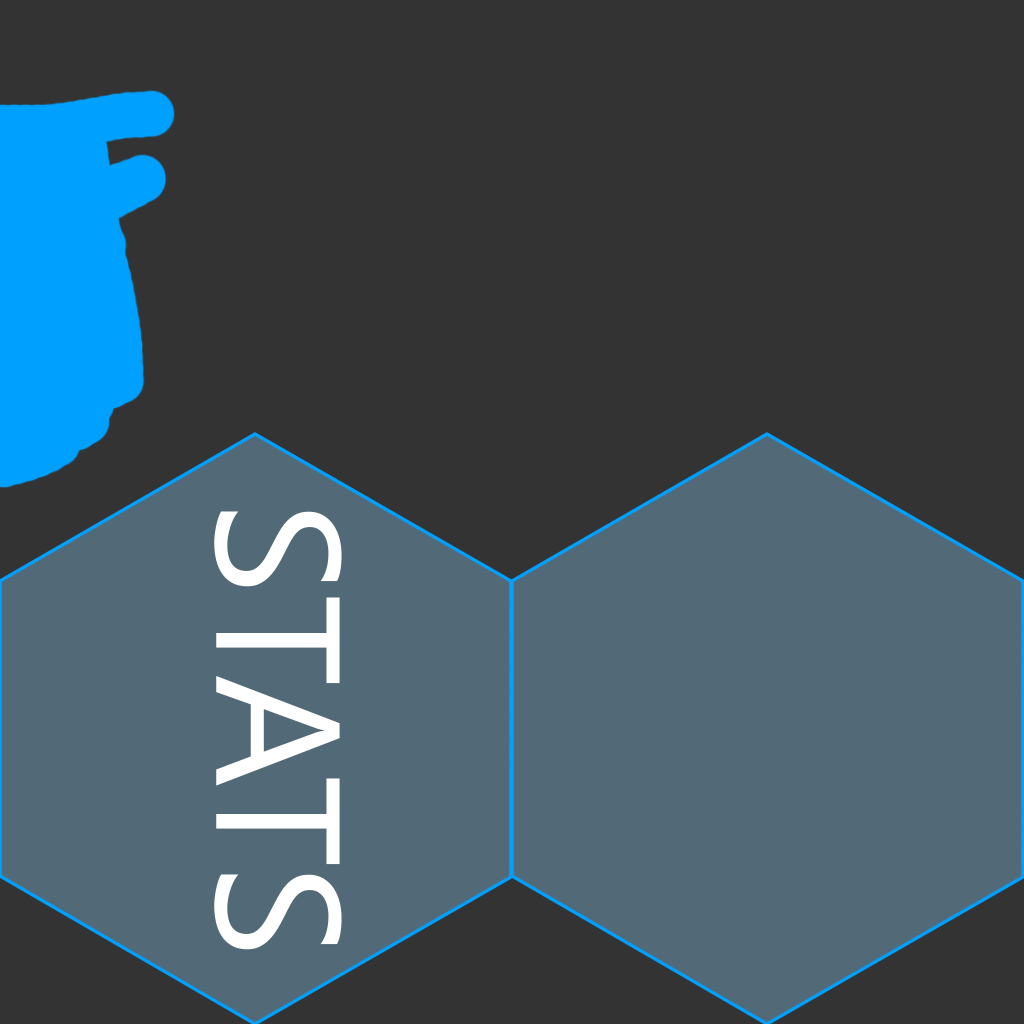
<style>
.page{position:relative;width:1024px;height:1024px;background:#333333}
.page>*{position:absolute;margin:0}
.t1{font:176px "SegoeUI";color:#ffffff}
</style>
<div class="page">
<p class="t1" style="left:214px;top:511px;width:128px;height:439px;rotate:90deg">STATS</p>
</div>
